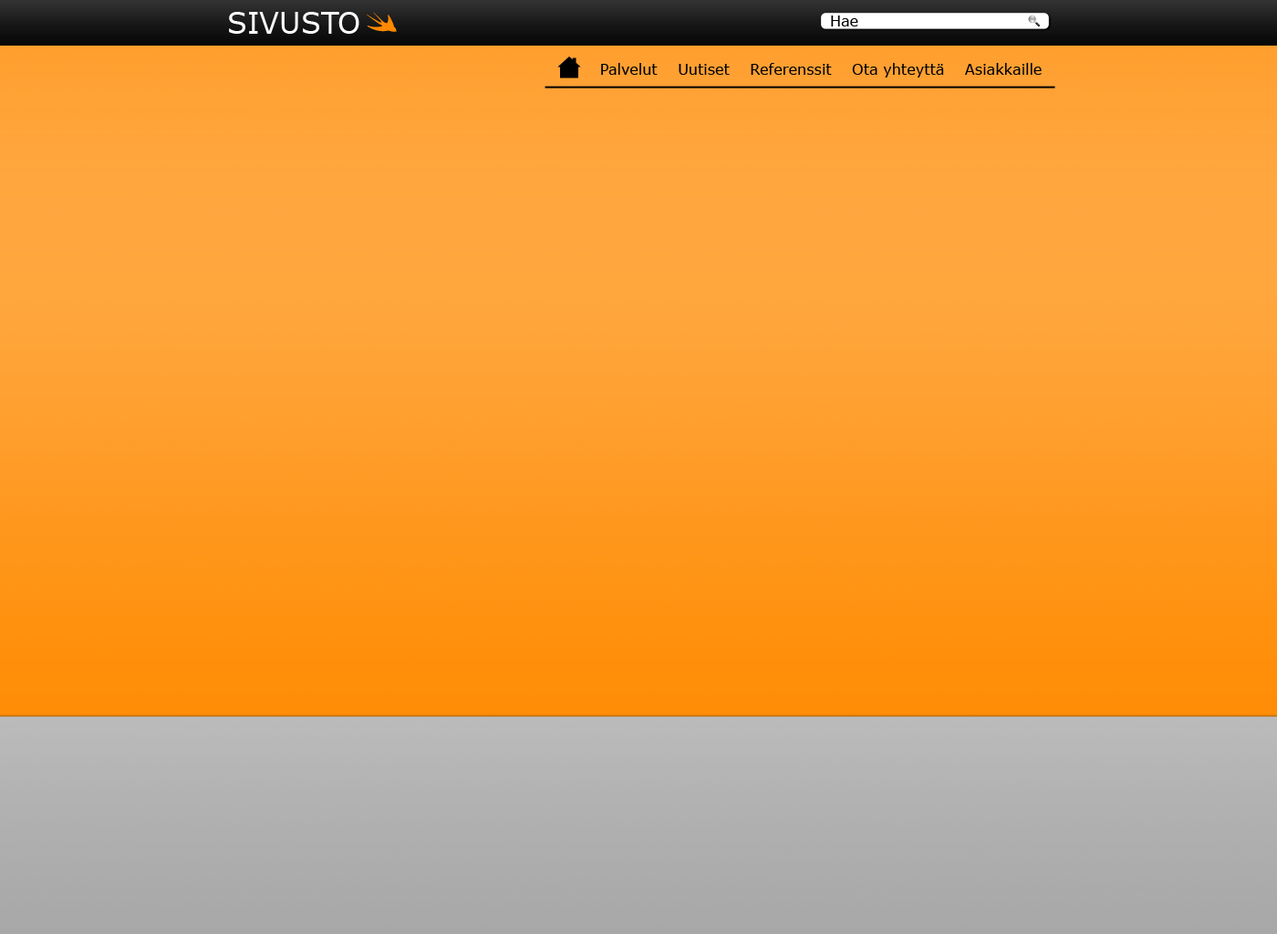
<style>
.page{position:relative;width:1277px;height:934px}
.page>*{position:absolute;margin:0}
.t1{font:29.2px "Verdana";color:#ffffff}
.t2{font:14.6px "Verdana";color:#000000}
</style>
<div class="page">
<p class="t1" style="left:229px;top:12px;width:130px;height:22px">SIVUSTO</p>
<p class="t2" style="left:831px;top:16px;width:27px;height:10px">Hae</p>
<p class="t2" style="left:601px;top:63px;width:441px;height:15px">Palvelut    Uutiset    Referenssit    Ota yhteyttä    Asiakkaille</p>
</div>
